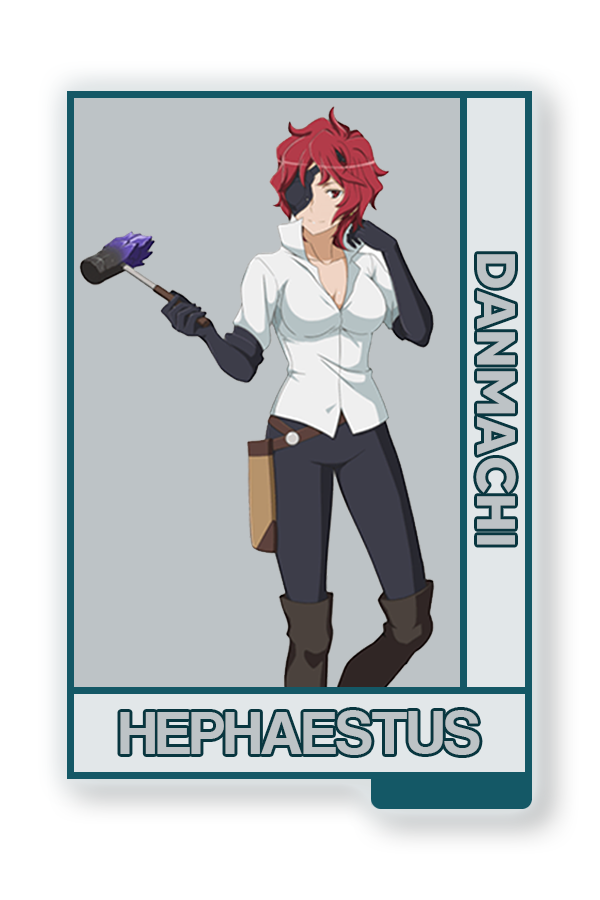
<style>
.page{position:relative;width:600px;height:900px;background:#bdc3c6}
.page>*{position:absolute;margin:0}
.t1{font:54.4px "MADETOMMY-Bold";color:#bdc3c6}
.t2{font:63.7px "CoolveticaRg-Regular";color:#bdc3c6}
</style>
<div class="page">
<p class="t1" style="left:476px;top:254px;width:40px;height:291px;rotate:90deg">DANMACHI</p>
<p class="t2" style="left:120px;top:710px;width:360px;height:45px">HEPHAESTUS</p>
</div>
